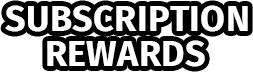
<style>
.page{position:relative;width:253px;height:72px;background:#ffffff}
.page>*{position:absolute;margin:0}
.t1{font:36px "FiraSans-Bold";color:#ffffff;text-transform:uppercase}
</style>
<div class="page">
<p class="t1" style="left:5px;top:5px;width:243px;height:27px">subscription</p>
<p class="t1" style="left:47px;top:40px;width:158px;height:27px">rewards</p>
</div>
